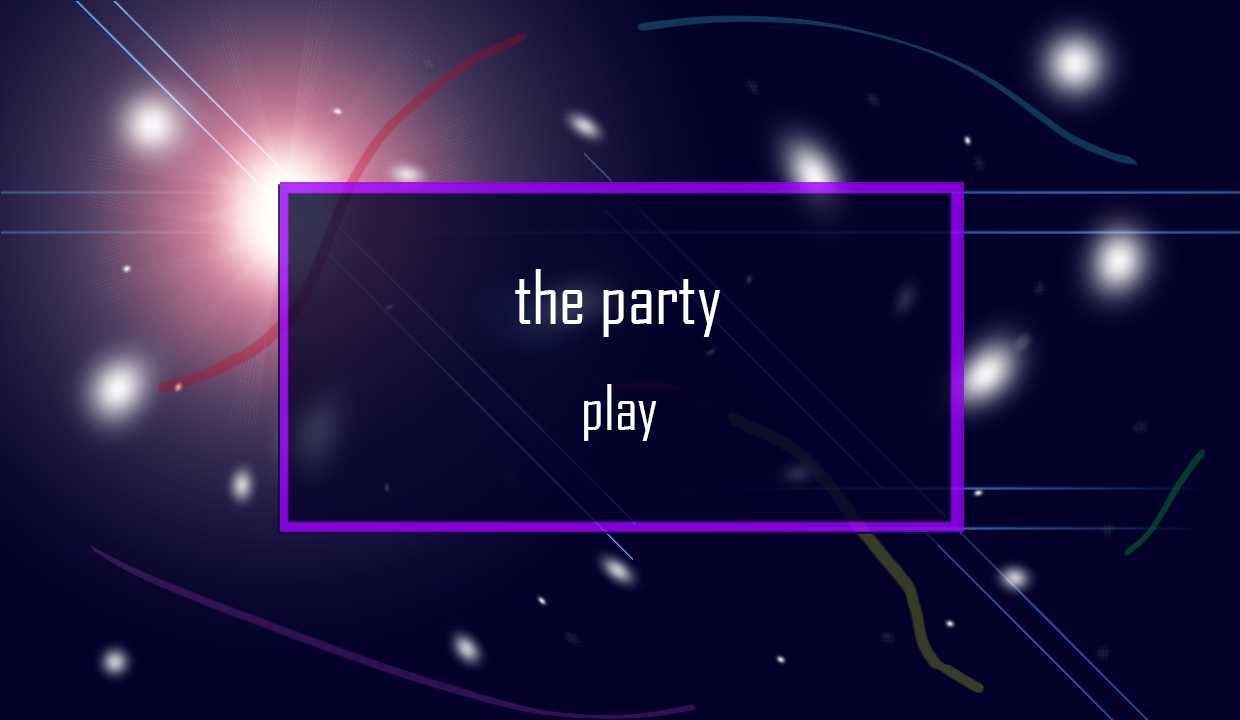
<style>
.page{position:relative;width:1240px;height:720px;background:#03012a}
.page>*{position:absolute;margin:0}
.t1{font:72px "AgencyFB-Reg";color:#ffffff}
.t2{font:60px "AgencyFB-Reg";color:#ffffff}
</style>
<div class="page">
<p class="t1" style="left:515px;top:269px;width:205px;height:68px">the party</p>
<p class="t2" style="left:584px;top:384px;width:73px;height:57px">play</p>
</div>
